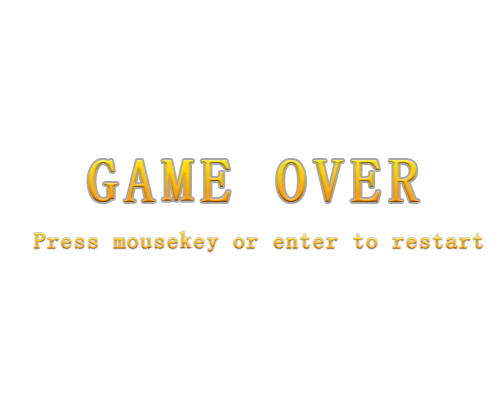
<style>
.page{position:relative;width:500px;height:400px;background:#ffffff}
.page>*{position:absolute;margin:0}
.t1{font:60px "SimSun";letter-spacing:0.1em;font-weight:bold}
.t2{font:23px "SimSun";letter-spacing:0.05em;font-weight:bold}
</style>
<div class="page">
<p class="t1" style="left:88px;top:160px;width:331px;height:42px">GAME OVER</p>
<p class="t2" style="left:34px;top:231px;width:449px;height:21px">Press mousekey or enter to restart</p>
</div>
